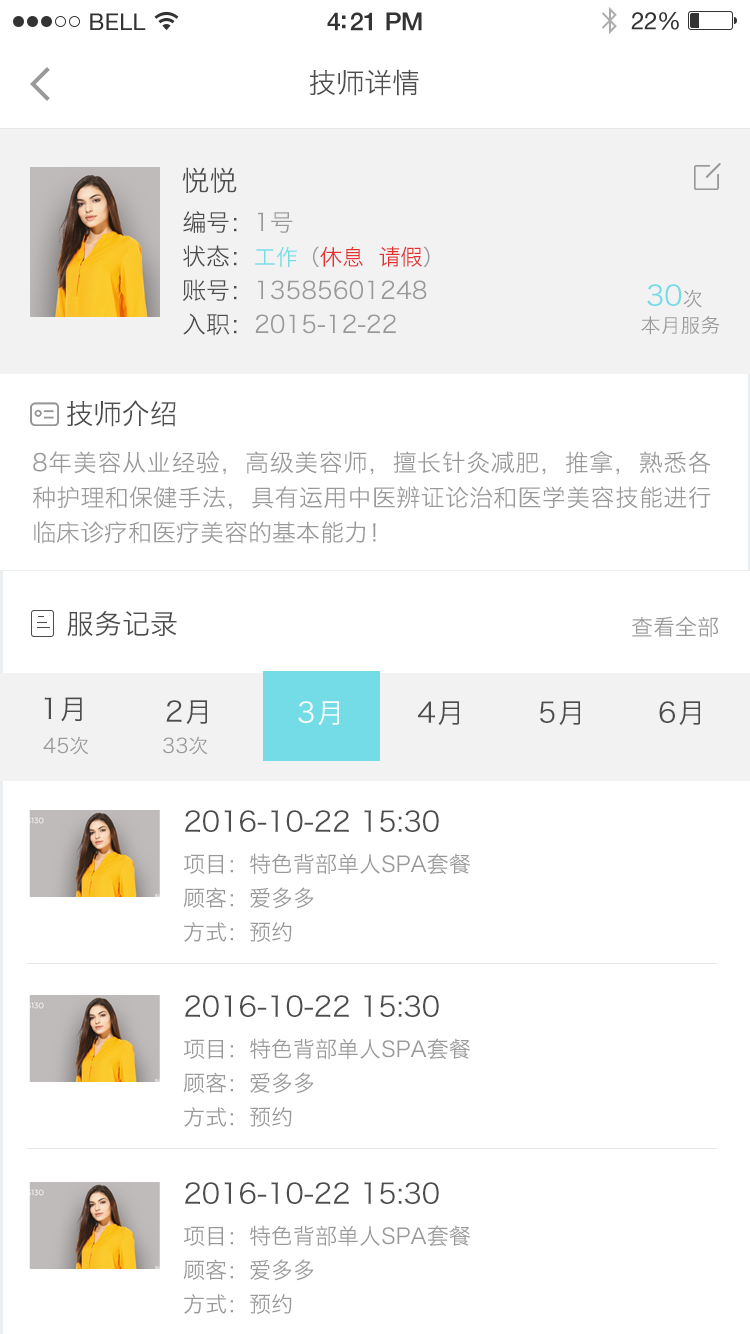
<style>
.page{position:relative;width:750px;height:1334px;background:#ffffff}
.page>*{position:absolute;margin:0}
.t1{font:28px "HiraginoSansGB-W3";color:#4d4d4d}
.t2{font:24px/34px "HiraginoSansGB-W3";color:#999999}
.t3{font:24px/34px "HiraginoSansGB-W3";color:#4c4c4c}
.t4{font:22px/34px "HiraginoSansGB-W3";color:#73dce6}
.t5{font:22px/34px "HiraginoSansGB-W3";color:#999999}
.t6{font:22px/34px "HiraginoSansGB-W3";color:#e42f2f}
.t7{font:28px "HiraginoSansGB-W3";color:#73dce6}
.t8{font:20px "HiraginoSansGB-W3";color:#999999}
.t9{font:24px/35px "HiraginoSansGB-W3";color:#999999}
.t10{font:24px/32px "HiraginoSansGB-W3";color:#999999}
.t11{font:28px "HiraginoSansGB-W3";color:#4c4c4c}
.t12{font:22px "HiraginoSansGB-W3";color:#999999}
.t13{font:28px "HiraginoSansGB-W3";letter-spacing:0.03em;color:#4d4d4d}
.t14{font:28px "HiraginoSansGB-W3";letter-spacing:0.03em;color:#ffffff}
</style>
<div class="page">
<p class="t1" style="left:309px;top:69px;width:110px;height:27px">技师详情</p>
<p class="t1" style="left:182px;top:167px;width:55px;height:26px">悦悦</p>
<p class="t2" style="left:182px;top:211px;width:248px;height:125px;text-align:justify"><span class="t3">编号：</span>1号<br><span class="t3">状态：</span><span class="t4">工作</span><span class="t5">（</span><span class="t6">休息  请假</span><span class="t5">）<br></span><span class="t3">账号：</span>13585601248<br><span class="t3">入职：</span>2015-12-22</p>
<p class="t7" style="left:647px;top:284px;width:55px;height:24px"><span class="t8">                                       </span> 30<span class="t8">次</span></p>
<p class="t8" style="left:641px;top:316px;width:79px;height:19px">本月服务</p>
<p class="t1" style="left:67px;top:400px;width:109px;height:27px">技师介绍</p>
<p class="t9" style="left:32px;top:450px;width:679px;height:94px;text-align:justify">8年美容从业经验，高级美容师，擅长针灸减肥，推拿，熟悉各种护理和保健手法，具有运用中医辨证论治和医学美容技能进行临床诊疗和医疗<span class="t10">美容的基本能力！</span></p>
<p class="t11" style="left:67px;top:611px;width:110px;height:26px">服务记录</p>
<p class="t12" style="left:632px;top:616px;width:86px;height:22px">查看全部</p>
<p class="t13" style="left:44px;top:697px;width:38px;height:25px">1月</p>
<p class="t13" style="left:166px;top:700px;width:42px;height:25px">2月</p>
<p class="t14" style="left:298px;top:701px;width:42px;height:25px">3月</p>
<p class="t13" style="left:418px;top:701px;width:42px;height:25px">4月</p>
<p class="t13" style="left:540px;top:701px;width:41px;height:25px">5月</p>
<p class="t13" style="left:659px;top:701px;width:42px;height:25px">6月</p>
<p class="t8" style="left:43px;top:736px;width:46px;height:19px">45次</p>
<p class="t8" style="left:163px;top:736px;width:45px;height:19px">33次</p>
<p class="t1" style="left:185px;top:810px;width:254px;height:22px">2016-10-22 15:30</p>
<p class="t5" style="left:183px;top:853px;width:287px;height:89px;text-align:justify">项目：<span class="t12">特色背部单人SPA套餐<br></span>顾客：爱多多<br>方式：预约</p>
<p class="t1" style="left:185px;top:995px;width:254px;height:22px">2016-10-22 15:30</p>
<p class="t5" style="left:183px;top:1038px;width:287px;height:89px;text-align:justify">项目：<span class="t12">特色背部单人SPA套餐<br></span>顾客：爱多多<br>方式：预约</p>
<p class="t1" style="left:185px;top:1182px;width:254px;height:22px">2016-10-22 15:30</p>
<p class="t5" style="left:183px;top:1225px;width:287px;height:89px;text-align:justify">项目：<span class="t12">特色背部单人SPA套餐<br></span>顾客：爱多多<br>方式：预约</p>
</div>
